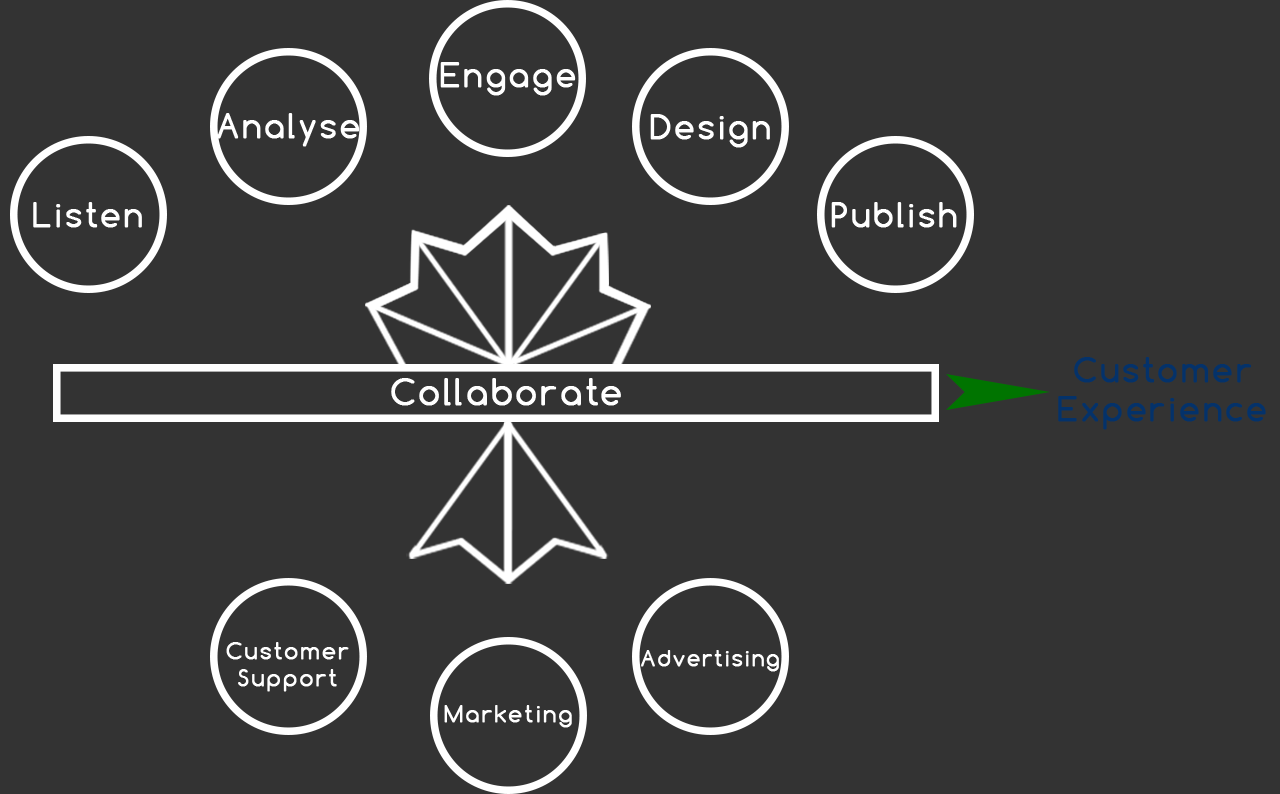
<style>
.page{position:relative;width:1280px;height:794px;background:#333333}
.page>*{position:absolute;margin:0}
.t1{font:31.9px "Comfortaa";letter-spacing:0.08em;color:#ffffff;font-weight:bold}
.t2{font:32.2px "Comfortaa";letter-spacing:0.08em;color:#04326a;font-weight:bold}
.t3{font:33.9px "Comfortaa";letter-spacing:0.08em;color:#ffffff;font-weight:bold}
.t4{font:22.2px "Comfortaa";letter-spacing:0.08em;color:#ffffff;font-weight:bold}
.t5{font:20.8px "Comfortaa";letter-spacing:0.08em;color:#ffffff;font-weight:bold}
</style>
<div class="page">
<p class="t1" style="left:440px;top:62px;width:136px;height:34px">Engage</p>
<p class="t1" style="left:217px;top:113px;width:143px;height:34px">Analyse</p>
<p class="t1" style="left:650px;top:114px;width:120px;height:34px">Design</p>
<p class="t1" style="left:33px;top:202px;width:109px;height:26px">Listen</p>
<p class="t1" style="left:831px;top:202px;width:126px;height:26px">Publish</p>
<p class="t2" style="left:1058px;top:357px;width:208px;height:73px;text-align:center">Customer<br>Experience</p>
<p class="t3" style="left:391px;top:378px;width:230px;height:28px">Collaborate</p>
<p class="t4" style="left:226px;top:642px;width:123px;height:50px;text-align:center">Customer<br>Support</p>
<p class="t5" style="left:641px;top:650px;width:138px;height:22px">Advertising</p>
<p class="t4" style="left:444px;top:705px;width:128px;height:23px">Marketing</p>
</div>
